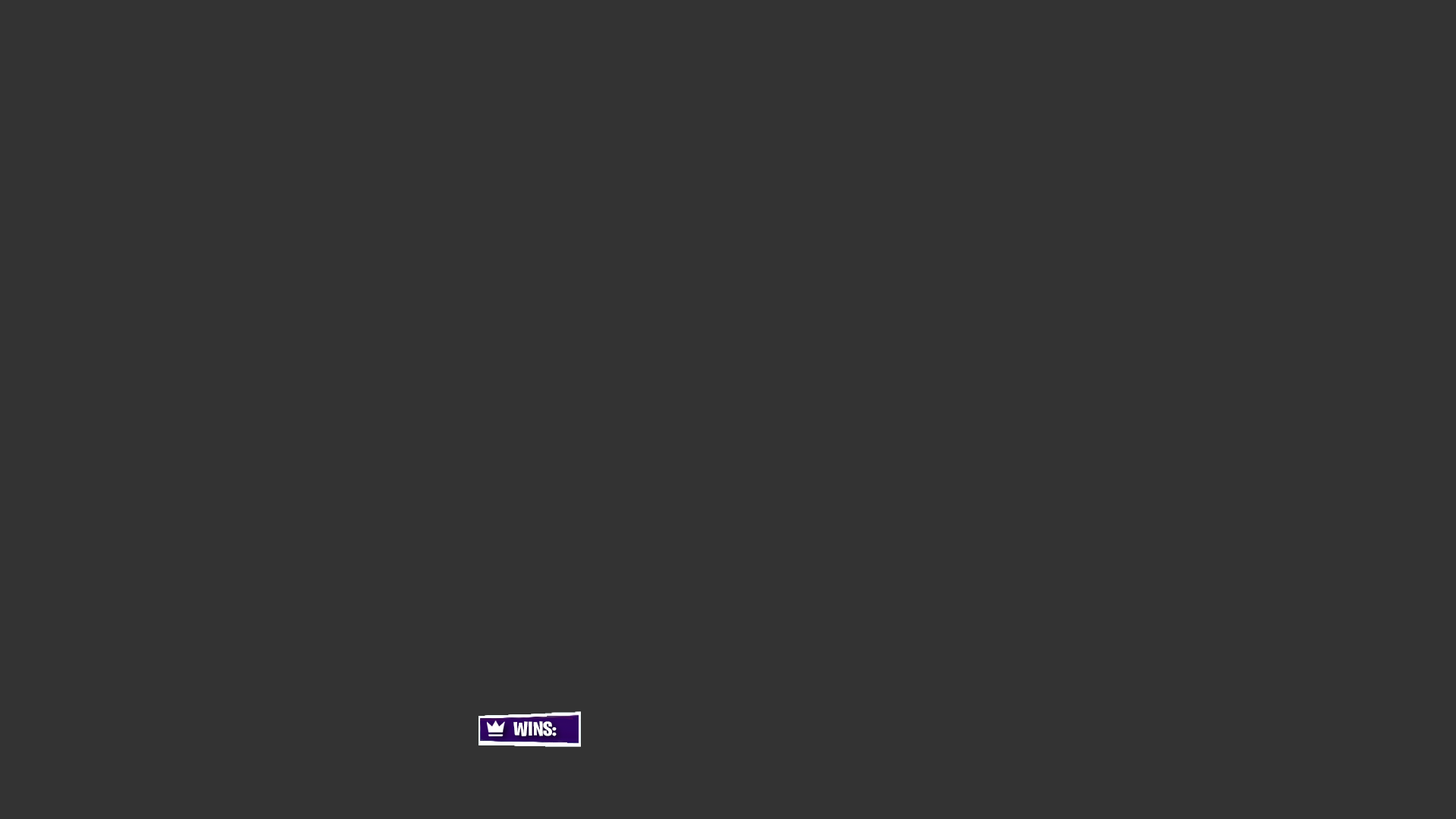
<style>
.page{position:relative;width:1456px;height:819px;background:#333333}
.page>*{position:absolute;margin:0}
.t1{font:19.9px "BurbankBigCondensed-Bold";color:#ffffff;scale:1.21 1}
</style>
<div class="page">
<p class="t1" style="left:513px;top:721px;width:44px;height:15px">WINS:</p>
</div>
